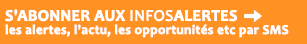
<style>
.page{position:relative;width:307px;height:44px;background:#ff9222}
.page>*{position:absolute;margin:0}
.t1{font:13.3px/13.3px "Candara-Bold";color:#ffffff;font-weight:bold}
.t2{font:10.7px/13.3px "Candara-Bold";color:#ffffff;font-weight:bold}
.t3{font:16px/13.3px "Candara-Bold";color:#ffffff;font-weight:bold}
.t4{font:16px/13.3px "Candara";color:#ffffff;font-weight:bold}
</style>
<div class="page">
<p class="t1" style="left:5px;top:9px;width:284px;height:29px"><span class="t2"><br></span><span class="t3">S'ABONNER AUX </span><span class="t4">INFOS</span><span class="t3">ALERTES<br></span>les alertes, l'actu, les opportunités etc par SMS</p>
</div>
